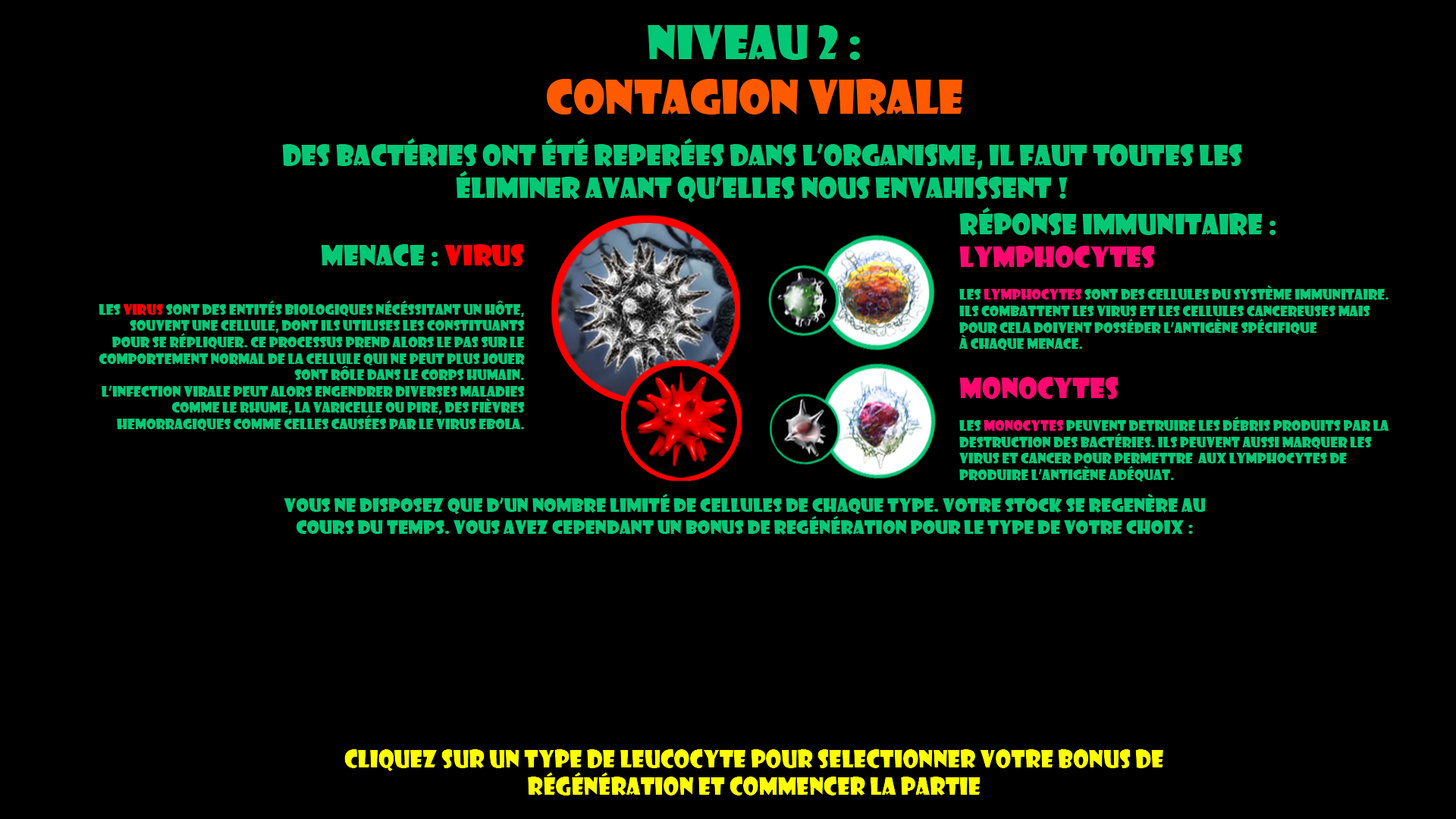
<style>
.page{position:relative;width:1456px;height:819px;background:#000000}
.page>*{position:absolute;margin:0}
.t1{font:45.5px "ShowcardGothic-Reg";color:#ff5a00}
.t2{font:45.5px "ShowcardGothic-Reg";color:#02c876}
.t3{font:27.3px "ShowcardGothic-Reg";color:#02c876}
.t4{font:13.6px "ShowcardGothic-Reg";color:#02c876}
.t5{font:27.3px "ShowcardGothic-Reg";color:#ff0971}
.t6{font:13.6px "ShowcardGothic-Reg";color:#ff0971}
.t7{font:27.3px "ShowcardGothic-Reg";color:#ff0000}
.t8{font:13.6px "ShowcardGothic-Reg";color:#ff0000}
.t9{font:18.2px "ShowcardGothic-Reg";color:#02c876}
</style>
<div class="page">
<p class="t1" style="left:547px;top:25px;width:415px;height:91px;text-align:center"><span class="t2">Niveau 2 : <br></span>CONTAGION VIRALE</p>
<p class="t3" style="left:282px;top:138px;width:960px;height:64px;text-align:center">dES BACtéries ont été reperées dans l’organisme, il faut toutes les éliminer avant qu’elles nous envahissent !</p>
<p class="t4" style="left:959px;top:207px;width:430px;height:275px"><span class="t3">Réponse immunitaire :<br></span><span class="t5">LYMPHOCYTES<br></span><br>Les <span class="t6">LYMPHOCYTES </span>SONT DES CELLULES DU SYSTème immunitaire. Ils combattent les virus et les cellules cancereuses mais pour cela doivent posséder l’antigène spécifique <br>à chaque menace.<br><br><span class="t5">Monocytes<br></span><br>Les <span class="t6">monocytes </span>peuvent detruire les débris produits par la <br>destruction des bactéries. Ils peuvent aussi marquer les virus et cancer pour permettre  aux lymphocytes de <br>produire l’antigène adéquat.</p>
<p class="t4" style="left:99px;top:244px;width:426px;height:187px;text-align:right"><span class="t3">Menace : </span><span class="t7">Virus<br><br></span>LES <span class="t8">VIRUS </span>SONT DES ENTITés biologiques nécéssitant un hôte, souvent une cellule, dont ils utilises les constituants pour se répliquer. CE processus prend alors le pas sur le<br> comportement normal de la cellule qui ne peut plus jouer sont rôle dans le corps humain.<br>L’infection virale peut alors engendrer diverses maladies comme le RHUME, la VARICELLe ou pire, des fièvres <br>hemorRagiques comme celles causées par le virus ebola.</p>
<p class="t9" style="left:284px;top:494px;width:922px;height:41px;text-align:center">VOUS NE DISPOSEZ QUE D’un nombre limité de cellules de chaque type. Votre stock se regenère au cours du temps. Vous avez cependant un bonus de regénération pour le type de votre choix :</p>
</div>
